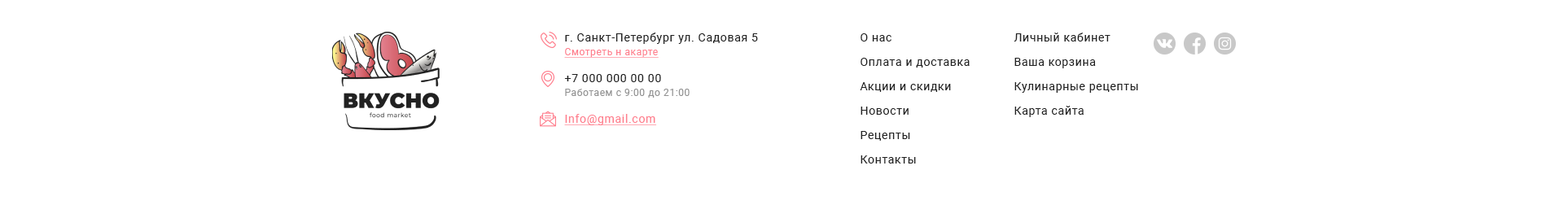
<style>
.page{position:relative;width:1568px;height:205px;background:#ffffff}
.page>*{position:absolute;margin:0}
.t1{font:11.4px "Roboto-Regular";letter-spacing:0.05em;color:#212121}
.t2{font:11.4px/24.4px "Roboto-Regular";letter-spacing:0.05em;color:#212121}
.t3{font:9.8px "Roboto-Regular";letter-spacing:0.05em;color:#ff7f8e;text-decoration:underline}
.t4{font:9.8px "Roboto-Regular";letter-spacing:0.05em;color:#929292}
.t5{font:11.4px "Roboto-Regular";letter-spacing:0.05em;color:#ff7f8e;text-decoration:underline}
</style>
<div class="page">
<p class="t1" style="left:565px;top:33px;width:193px;height:11px">г. Санкт-Петербург ул. Садовая 5</p>
<p class="t2" style="left:860px;top:33px;width:110px;height:131px">О нас   <br>Оплата и доставка  <br>Акции и скидки    <br>Новости   <br>Рецепты    <br>Контакты</p>
<p class="t2" style="left:1014px;top:33px;width:124px;height:84px">Личный кабинет   <br>Ваша корзина <br>Кулинарные рецепты   <br>Карта сайта</p>
<p class="t3" style="left:564px;top:48px;width:95px;height:10px">Смотреть н акарте</p>
<p class="t1" style="left:564px;top:74px;width:97px;height:8px">+7 000 000 00 00</p>
<p class="t4" style="left:565px;top:89px;width:125px;height:9px">Работаем с 9:00 до 21:00</p>
<p class="t5" style="left:564px;top:114px;width:93px;height:11px">Info@gmail.com</p>
</div>
